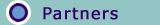
<style>
.page{position:relative;width:160px;height:25px;background:#94c5c5}
.page>*{position:absolute;margin:0}
.t1{font:16px "Verdana";letter-spacing:0.055em;color:#330066;font-weight:bold}
</style>
<div class="page">
<p class="t1" style="left:43px;top:7px;width:75px;height:13px">Partners</p>
</div>
